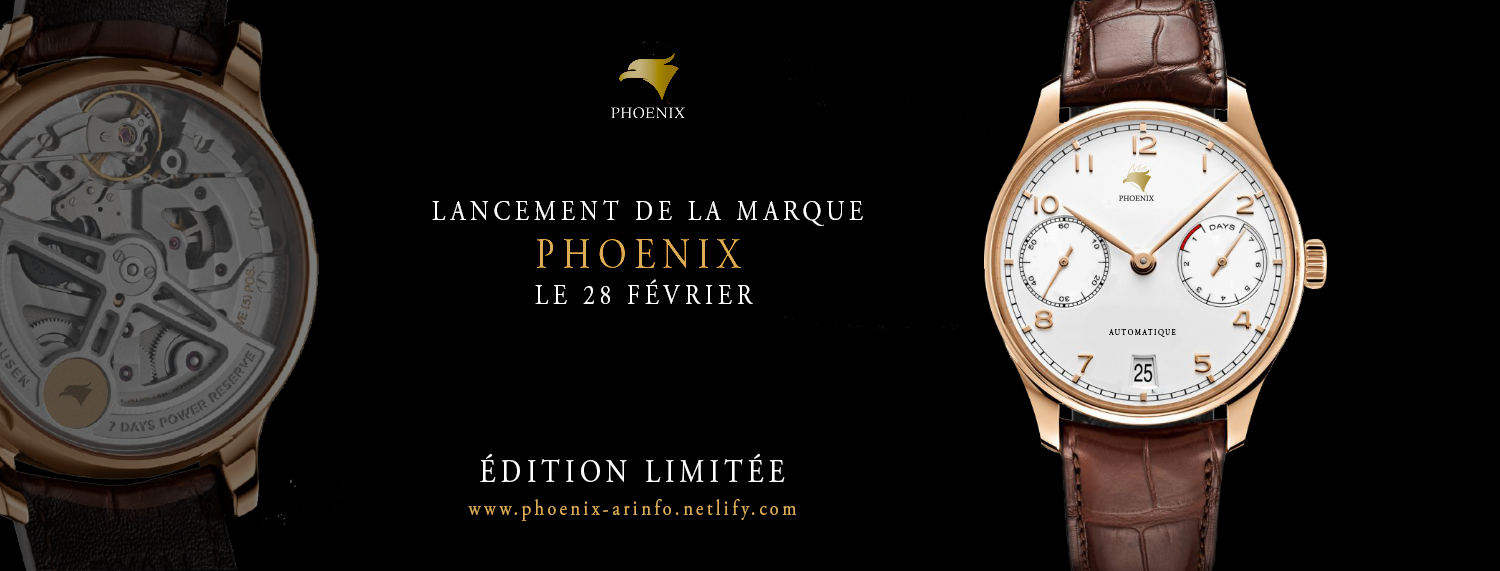
<style>
.page{position:relative;width:1500px;height:571px;background:#000000}
.page>*{position:absolute;margin:0}
.t1{font:28.8px "AGaramondPro-Regular";letter-spacing:0.2em;color:#ffffff;text-transform:uppercase;scale:0.83 1}
.t2{font:43.2px "AGaramondPro-Regular";letter-spacing:0.2em;color:#dcad59;text-transform:uppercase;scale:0.83 1}
.t3{font:8.6px "AGaramondPro-Regular";letter-spacing:0.2em;color:#000000;font-variant:small-caps;scale:0.83 1}
.t4{font:32.4px "AGaramondPro-Regular";letter-spacing:0.2em;color:#ffffff;text-transform:uppercase;scale:0.83 1}
.t5{font:21.6px "AGaramondPro-Regular";letter-spacing:0.2em;color:#dcad59;scale:0.83 1}
</style>
<div class="page">
<p class="t1" style="left:432px;top:200px;width:431px;height:26px">lANCEMeNT DE LA MARQUE</p>
<p class="t2" style="left:536px;top:239px;width:205px;height:29px">PHOENIX</p>
<p class="t1" style="left:535px;top:279px;width:218px;height:25px">le 28 février</p>
<p class="t3" style="left:1109px;top:328px;width:67px;height:9px">AUTOMATIQUE</p>
<p class="t4" style="left:480px;top:453px;width:305px;height:30px">édition limitée</p>
<p class="t5" style="left:468px;top:499px;width:329px;height:22px">www.phoenix-arinfo.netlify.com</p>
</div>
